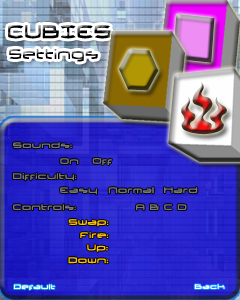
<style>
.page{position:relative;width:240px;height:300px}
.page>*{position:absolute;margin:0}
.t1{font:23.2px "ThundergodII";scale:0.8 1}
.t2{font:18px "ThundergodII";scale:0.8 1}
.t3{font:10px "ThundergodII";color:#767676}
.t4{font:10px "ThundergodII";color:#ffc000}
.t5{font:8px "ThundergodII";color:#ffffff}
</style>
<div class="page">
<p class="t1" style="left:8px;top:25px;width:103px;height:14px">CUBIES</p>
<p class="t2" style="left:9px;top:49px;width:89px;height:13px">Settings</p>
<p class="t3" style="left:13px;top:142px;width:59px;height:7px">Sounds:</p>
<p class="t3" style="left:60px;top:158px;width:19px;height:6px">On</p>
<p class="t3" style="left:92px;top:158px;width:20px;height:7px">Off</p>
<p class="t3" style="left:13px;top:173px;width:64px;height:8px">Difficulty:</p>
<p class="t3" style="left:60px;top:187px;width:37px;height:8px">Easy</p>
<p class="t3" style="left:108px;top:187px;width:46px;height:7px">Normal</p>
<p class="t3" style="left:164px;top:187px;width:34px;height:7px">Hard</p>
<p class="t3" style="left:13px;top:204px;width:63px;height:7px">Controls:</p>
<p class="t3" style="left:136px;top:204px;width:51px;height:7px">A B C D</p>
<p class="t4" style="left:68px;top:219px;width:41px;height:8px">Swap:</p>
<p class="t4" style="left:80px;top:232px;width:29px;height:6px">Fire:</p>
<p class="t4" style="left:87px;top:244px;width:21px;height:8px">Up:</p>
<p class="t4" style="left:68px;top:257px;width:41px;height:7px">Down:</p>
<p class="t5" style="left:14px;top:284px;width:41px;height:6px">Default</p>
<p class="t5" style="left:194px;top:284px;width:31px;height:5px">Back</p>
</div>
